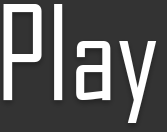
<style>
.page{position:relative;width:167px;height:132px;background:#333333}
.page>*{position:absolute;margin:0}
.t1{font:125px "AgencyFB-Reg";color:#ffffff}
</style>
<div class="page">
<p class="t1" style="left:3px;top:4px;width:154px;height:119px">Play</p>
</div>
